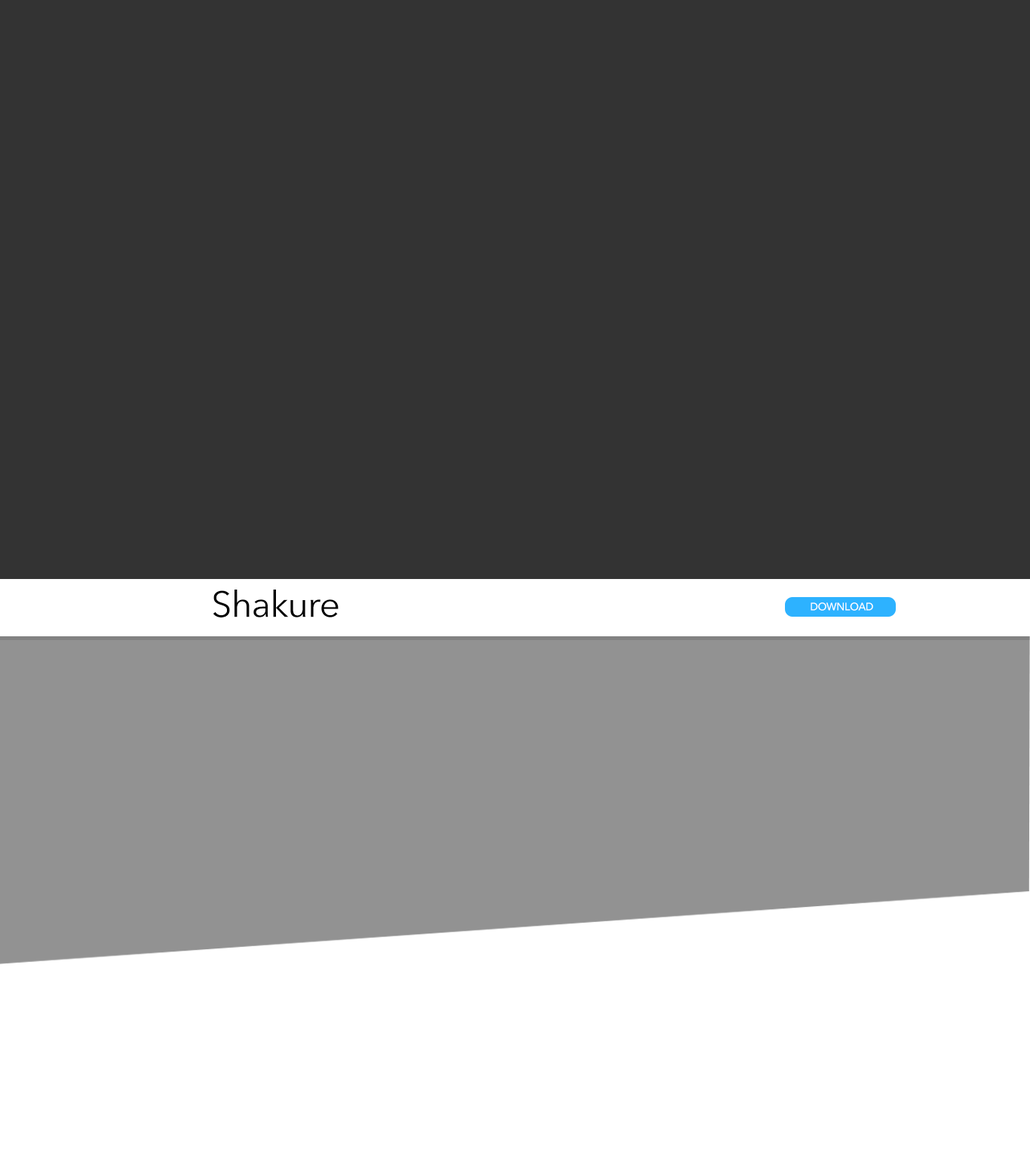
<style>
.page{position:relative;width:1030px;height:1158px;background:#333333}
.page>*{position:absolute;margin:0}
.t1{font:36.2px "AvenirNext-Regular";letter-spacing:-0.02em;color:#000000}
.t2{font:10.6px "Avenir-Medium";letter-spacing:-0.02em;color:#ffffff}
</style>
<div class="page">
<p class="t1" style="left:213px;top:590px;width:125px;height:27px">Shakure</p>
<p class="t2" style="left:810px;top:602px;width:63px;height:9px">DOWNLOAD</p>
</div>
